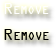
<style>
.page{position:relative;width:56px;height:48px;background:#ffffff}
.page>*{position:absolute;margin:0}
.t1{font:17px "OCRAExtended";color:#ffffff;font-variant:small-caps}
.t2{font:17px "OCRAExtended";color:#000000;font-variant:small-caps}
</style>
<div class="page">
<p class="t1" style="left:4px;top:3px;width:45px;height:11px">Remove</p>
<p class="t2" style="left:4px;top:29px;width:45px;height:11px">Remove</p>
</div>
